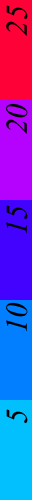
<style>
.page{position:relative;width:32px;height:500px}
.page>*{position:absolute;margin:0}
.t1{font:37.5px "Vijaya";color:#000000}
</style>
<div class="page">
<p class="t1" style="left:6px;top:5px;width:22px;height:419px;rotate:-90deg">5          10         15          20         25</p>
</div>
